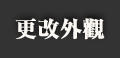
<style>
.page{position:relative;width:120px;height:58px;background:#333333}
.page>*{position:absolute;margin:0}
.t1{font:22px "RyuminPr6N-ExBold";color:#fbf8f3;font-weight:bold}
</style>
<div class="page">
<p class="t1" style="left:15px;top:18px;width:90px;height:22px">更改外觀</p>
</div>
